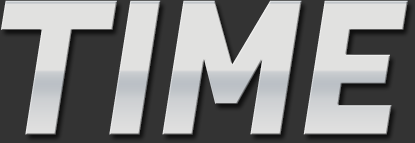
<style>
.page{position:relative;width:415px;height:143px;background:#333333}
.page>*{position:absolute;margin:0}
.t1{font:185.2px "FugazOne-Regular";color:#dfdfdf;scale:0.89 1}
</style>
<div class="page">
<p class="t1" style="left:1px;top:0px;width:407px;height:135px">TIME</p>
</div>
